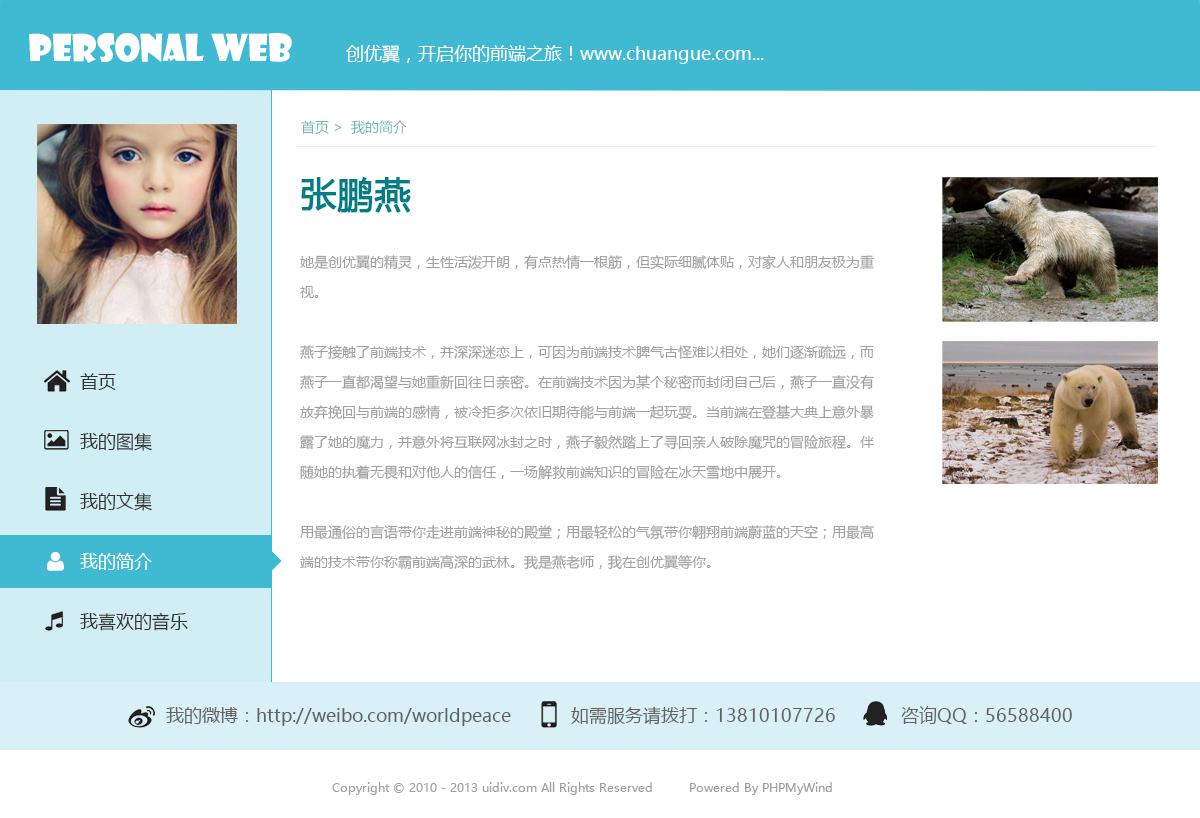
<style>
.page{position:relative;width:1200px;height:818px;background:#ffffff}
.page>*{position:absolute;margin:0}
.t1{font:36px "ShowcardGothic";color:#ffffff}
.t2{font:18px "MicrosoftYaHei";color:#ffffff}
.t3{font:14px "MicrosoftYaHei";color:#72b7bc}
.t4{font:14px/30px "MicrosoftYaHei";color:#a1a1a1}
.t5{font:36px/30px "MicrosoftYaHei";color:#007e86;font-weight:bold}
.t6{font:18px/30px "MicrosoftYaHei";color:#333333}
.t7{font:18px/30px "MicrosoftYaHei";color:#ffffff}
.t8{font:18px "MicrosoftYaHei";color:#616161}
.t9{font:12px "MicrosoftYaHei";color:#a2a2a2}
</style>
<div class="page">
<p class="t1" style="left:29px;top:33px;width:263px;height:30px">personal web</p>
<p class="t2" style="left:346px;top:45px;width:418px;height:19px">创优翼，开启你的前端之旅！www.chuangue.com...</p>
<p class="t3" style="left:301px;top:120px;width:106px;height:14px">首页 &gt;  我的简介</p>
<p class="t4" style="left:300px;top:177px;width:574px;height:393px"><span class="t5">张鹏燕 <br><br></span>她是创优翼的精灵，生性活泼开朗，有点热情一根筋，但实际细腻体贴，对家人和朋友极为重视。<br><br>燕子接触了前端技术，并深深迷恋上，可因为前端技术脾气古怪难以相处，她们逐渐疏远，而燕子一直都渴望与她重新回往日亲密。在前端技术因为某个秘密而封闭自己后，燕子一直没有放弃挽回与前端的感情，被冷拒多次依旧期待能与前端一起玩耍。当前端在登基大典上意外暴露了她的魔力，并意外将互联网冰封之时，燕子毅然踏上了寻回亲人破除魔咒的冒险旅程。伴随她的执着无畏和对他人的信任，一场解救前端知识的冒险在冰天雪地中展开。<br><br>用最通俗的言语带你走进前端神秘的殿堂；用最轻松的气氛带你翱翔前端蔚蓝的天空；用最高端的技术带你称霸前端高深的武林。我是燕老师，我在创优翼等你。</p>
<p class="t6" style="left:80px;top:373px;width:108px;height:258px">首页<br><br>我的图集<br><br>我的文集<br><br><span class="t7">我的简介<br></span><br>我喜欢的音乐</p>
<p class="t8" style="left:166px;top:706px;width:906px;height:20px">我的微博：http://weibo.com/worldpeace            如需服务请拨打：13810107726             咨询QQ：56588400</p>
<p class="t9" style="left:332px;top:782px;width:500px;height:13px">Copyright © 2010 - 2013 uidiv.com All Rights Reserved         Powered By PHPMyWind</p>
</div>
